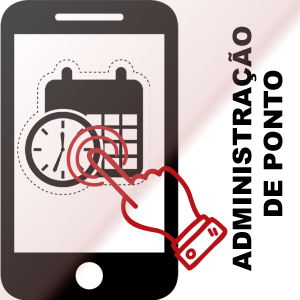
<style>
.page{position:relative;width:300px;height:300px;background:#ffffff}
.page>*{position:absolute;margin:0}
.t1{font:25.9px "Arial-Black";color:#000000}
</style>
<div class="page">
<p class="t1" style="left:228px;top:26px;width:55px;height:245px;text-align:center;rotate:-90deg">ADMINISTRAÇÃO <br>DE PONTO</p>
</div>
